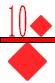
<style>
.page{position:relative;width:55px;height:83px;background:#ffffff}
.page>*{position:absolute;margin:0}
.t1{font:42px "DFKaiShu-SB-Estd-BF";color:#ff0000;scale:0.5 1}
</style>
<div class="page">
<p class="t1" style="left:9px;top:5px;width:18px;height:33px">10</p>
</div>
